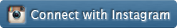
<style>
.page{position:relative;width:177px;height:28px}
.page>*{position:absolute;margin:0}
.t1{font:12px "LucidaSans";letter-spacing:0.005em;color:#ffffff}
</style>
<div class="page">
<p class="t1" style="left:31px;top:9px;width:139px;height:12px">Connect with Instagram</p>
</div>
